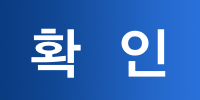
<style>
.page{position:relative;width:200px;height:100px}
.page>*{position:absolute;margin:0}
.t1{font:55px "YDIYGO340";letter-spacing:-0.006em;color:#ffffff}
</style>
<div class="page">
<p class="t1" style="left:31px;top:28px;width:135px;height:50px">확  인</p>
</div>
